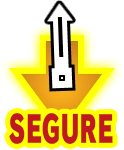
<style>
.page{position:relative;width:124px;height:150px;background:#ffffff}
.page>*{position:absolute;margin:0}
.t1{font:37.3px "RodinNTLGPro-UB";color:#c0191f;scale:0.62 1}
</style>
<div class="page">
<p class="t1" style="left:9px;top:113px;width:104px;height:31px">SEGURE</p>
</div>
